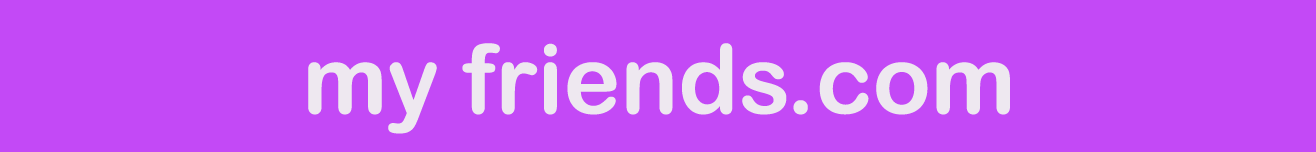
<style>
.page{position:relative;width:1316px;height:152px;background:#c349f6}
.page>*{position:absolute;margin:0}
.t1{font:96px "ArialRoundedMTBold";color:#eee8f0}
.t2{font:16px "Courier";color:#c349f6}
</style>
<div class="page">
<p class="t1" style="left:293px;top:43px;width:717px;height:91px"><span class="t2">M</span>my friends.com</p>
</div>
